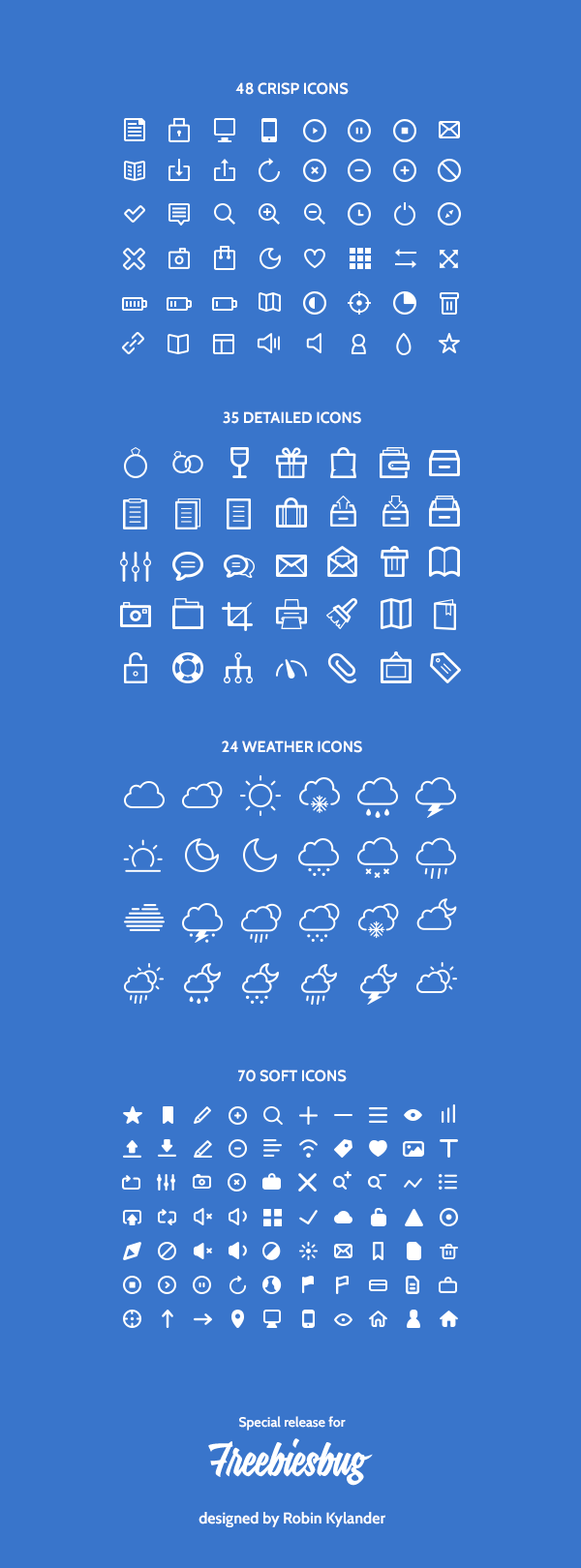
<style>
.page{position:relative;width:581px;height:1568px;background:#3975cb}
.page>*{position:absolute;margin:0}
.t1{font:15.5px "Cabin-Bold";color:#ffffff;text-transform:uppercase}
.t2{font:13.6px "Cabin-Bold";color:#ffffff}
.t3{font:15.5px "Cabin-Bold";color:#ffffff}
</style>
<div class="page">
<p class="t1" style="left:235px;top:82px;width:113px;height:13px">48 Crisp Icons</p>
<p class="t1" style="left:223px;top:411px;width:138px;height:13px">35 Detailed Icons</p>
<p class="t1" style="left:222px;top:740px;width:140px;height:13px">24 Weather Icons</p>
<p class="t1" style="left:238px;top:1070px;width:109px;height:12px">70 Soft Icons</p>
<p class="t2" style="left:239px;top:1416px;width:107px;height:15px">Special release for</p>
<p class="t3" style="left:198px;top:1512px;width:187px;height:15px">designed by Robin Kylander</p>
</div>
